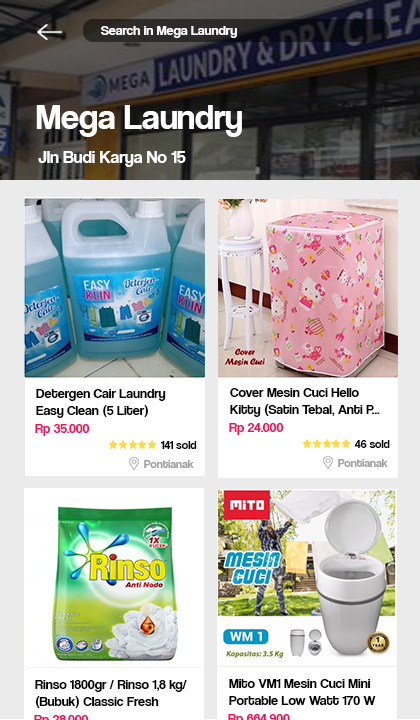
<style>
.page{position:relative;width:420px;height:720px}
.page>*{position:absolute;margin:0}
.t1{font:14px "CoolveticaRg-Regular";color:#ffffff}
.t2{font:36px "CoolveticaRg-Regular";color:#ffffff}
.t3{font:18px "CoolveticaRg-Regular";color:#ffffff}
.t4{font:14px "CoolveticaRg-Regular";color:#000000}
.t5{font:14px "CoolveticaRg-Regular";color:#ed145b}
.t6{font:12px "CoolveticaRg-Regular";color:#0a0909}
.t7{font:12px "CoolveticaRg-Regular";color:#a1a1a1}
</style>
<div class="page">
<p class="t1" style="left:101px;top:26px;width:136px;height:12px">Search in Mega Laundry</p>
<p class="t2" style="left:36px;top:105px;width:206px;height:32px">Mega Laundry</p>
<p class="t3" style="left:38px;top:151px;width:148px;height:16px">Jln Budi Karya No 15</p>
<p class="t4" style="left:36px;top:389px;width:130px;height:29px">Detergen Cair Laundry <br>Easy Clean (5 Liter)</p>
<p class="t4" style="left:230px;top:388px;width:150px;height:29px">Cover Mesin Cuci Hello <br>Kitty (Satin Tebal, Anti P...</p>
<p class="t5" style="left:35px;top:424px;width:55px;height:12px">Rp 35.000</p>
<p class="t5" style="left:229px;top:423px;width:55px;height:12px">Rp 24.000</p>
<p class="t6" style="left:160px;top:441px;width:37px;height:8px">141 sold</p>
<p class="t6" style="left:354px;top:440px;width:36px;height:8px">46 sold</p>
<p class="t7" style="left:144px;top:460px;width:50px;height:8px">Pontianak</p>
<p class="t7" style="left:338px;top:459px;width:50px;height:8px">Pontianak</p>
<p class="t4" style="left:35px;top:680px;width:152px;height:28px">Rinso 1800gr / Rinso 1,8 kg/<br>(Bubuk) Classic Fresh</p>
<p class="t4" style="left:229px;top:679px;width:147px;height:26px">Mito VM1 Mesin Cuci Mini<br>Portable Low Watt 170 W</p>
</div>
